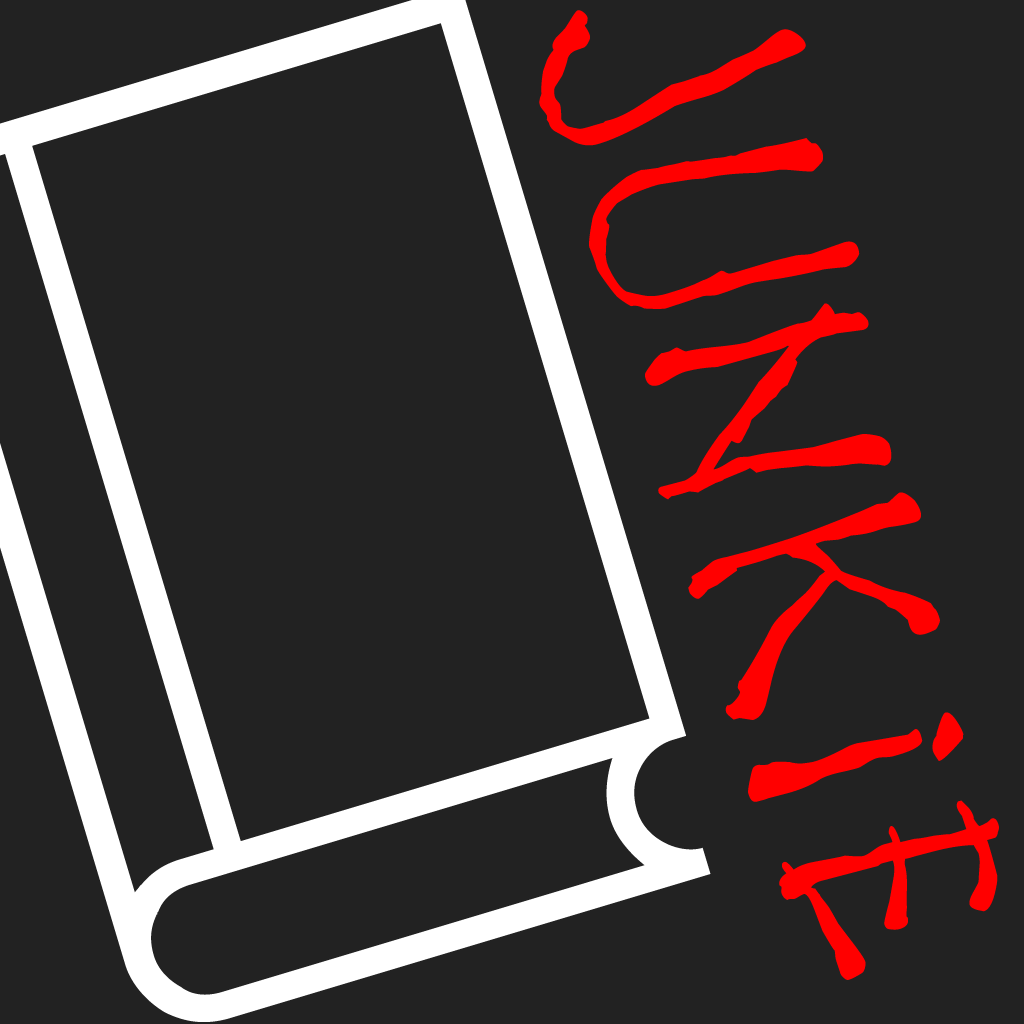
<style>
.page{position:relative;width:1024px;height:1024px;background:#222222}
.page>*{position:absolute;margin:0}
.t1{font:380.1px "WakingtheWitch";letter-spacing:0.1em;color:#ff0000}
</style>
<div class="page">
<p class="t1" style="left:539px;top:10px;width:460px;height:970px;rotate:75deg">JUNKIE</p>
</div>
